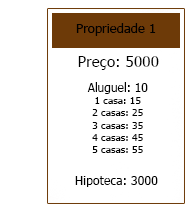
<style>
.page{position:relative;width:189px;height:212px;background:#ffffff}
.page>*{position:absolute;margin:0}
.t1{font:13.3px "Tahoma";color:#010101}
.t2{font:15.4px "Tahoma";color:#000000}
.t3{font:10.2px "Tahoma";color:#000000}
.t4{font:12px "Tahoma";color:#000000}
.t5{font:12.4px "Tahoma";color:#000000}
</style>
<div class="page">
<p class="t1" style="left:76px;top:23px;width:80px;height:13px">Propriedade 1</p>
<p class="t2" style="left:78px;top:56px;width:81px;height:14px">Preço: 5000</p>
<p class="t3" style="left:87px;top:82px;width:61px;height:71px;text-align:center"><span class="t4">Aluguel: 10<br></span>1 casa: 15<br>2 casas: 25<br>3 casas: 35<br>4 casas: 45<br>5 casas: 55</p>
<p class="t5" style="left:75px;top:176px;width:83px;height:11px">Hipoteca: 3000</p>
</div>
